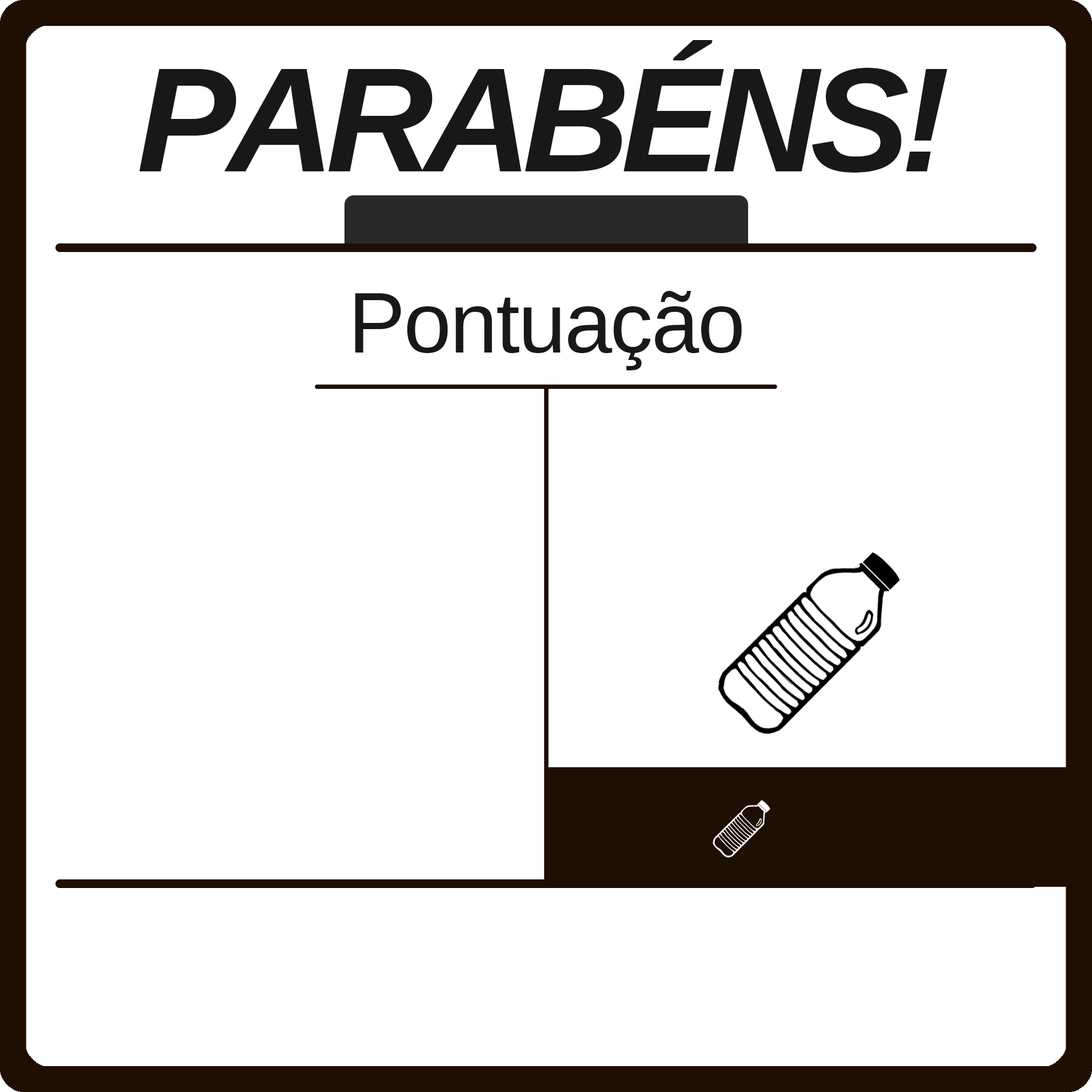
<style>
.page{position:relative;width:1092px;height:1092px;background:#ffffff}
.page>*{position:absolute;margin:0}
.t1{font:148.8px "LiberationSans-BoldItalic";letter-spacing:-0.06em;color:#181818}
.t2{font:85.9px "LiberationSans-Regular";letter-spacing:-0.02em;color:#181818}
</style>
<div class="page">
<p class="t1" style="left:139px;top:40px;width:809px;height:133px">PARABÉNS!</p>
<p class="t2" style="left:355px;top:291px;width:387px;height:79px">Pontuação</p>
</div>
